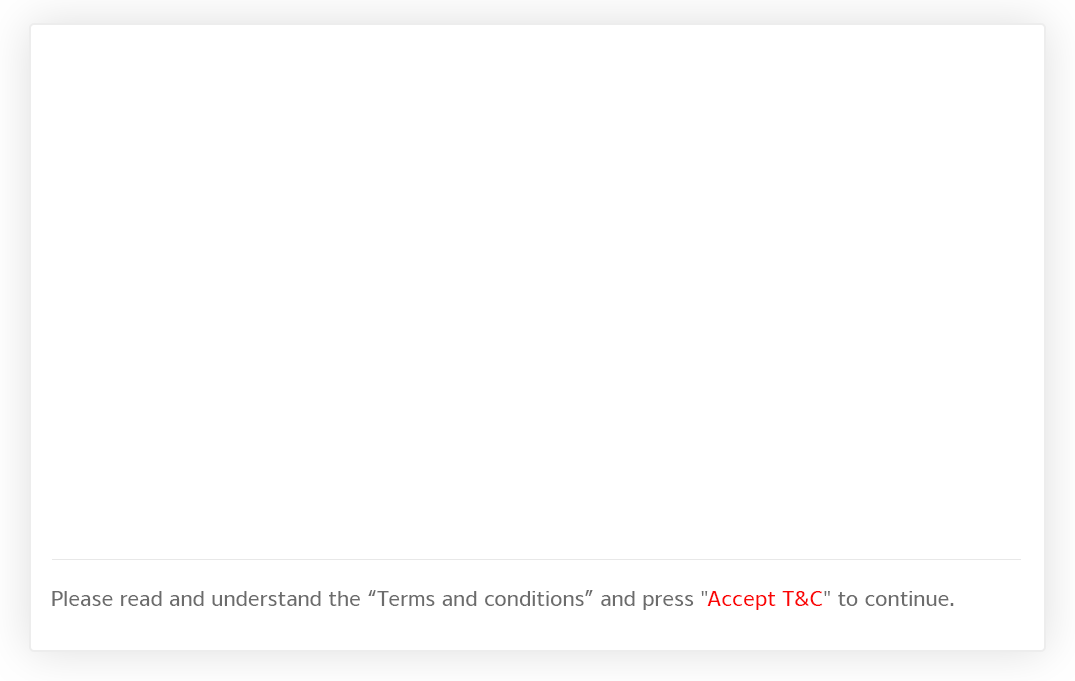
<style>
.page{position:relative;width:1075px;height:681px;background:#ffffff}
.page>*{position:absolute;margin:0}
.t1{font:22.9px "Anuyart-Regular";color:#6c6c6c}
.t2{font:22.9px "Anuyart-Regular";color:#fa0505}
</style>
<div class="page">
<p class="t1" style="left:52px;top:590px;width:902px;height:20px">Please read and understand the “Terms and conditions” and press "<span class="t2">Accept T&amp;C</span>" to continue.</p>
</div>
